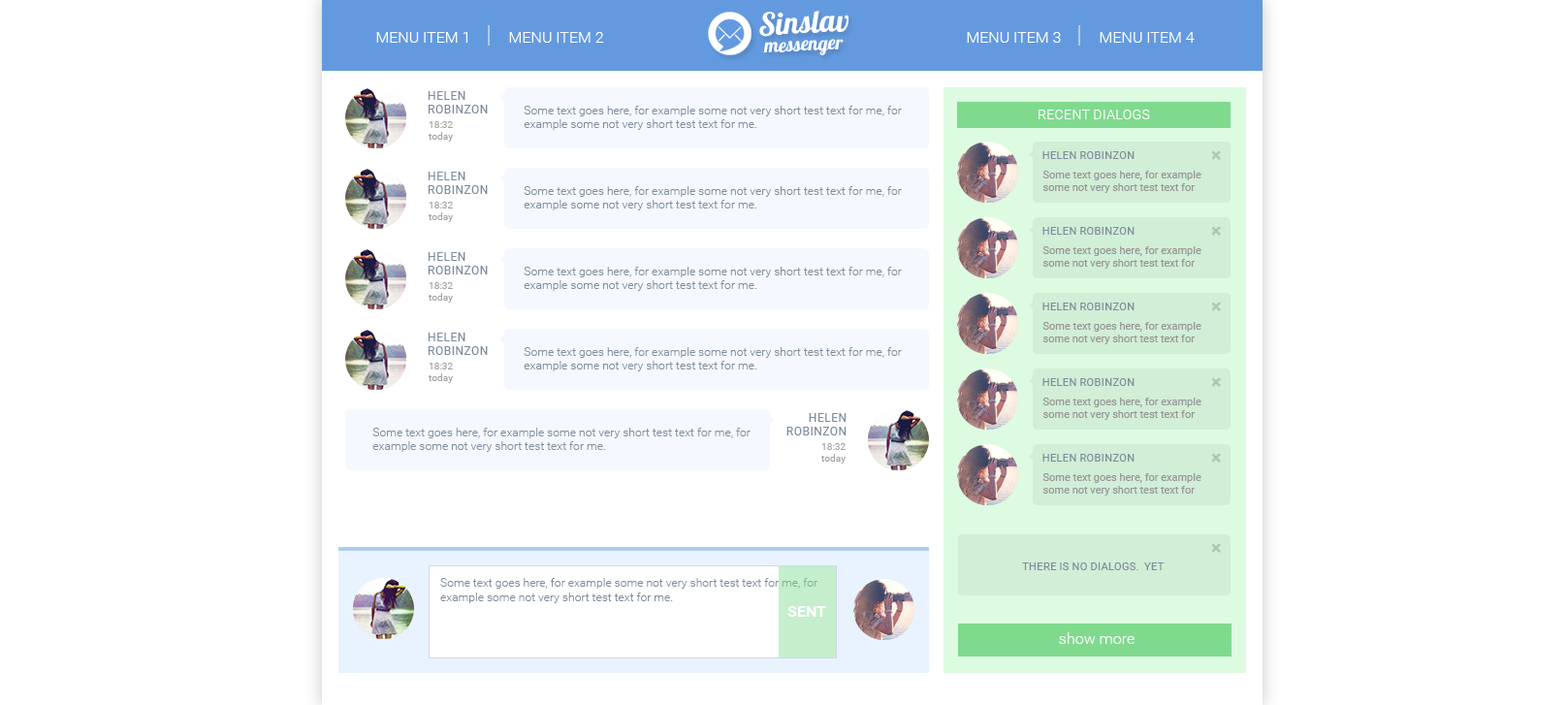
<style>
.page{position:relative;width:1568px;height:705px;background:#ffffff}
.page>*{position:absolute;margin:0}
.t1{font:15.5px "Roboto-Light";color:#ffffff}
.t2{font:24.2px "Roboto-Thin";color:#ffffff}
.t3{font:11.6px "Roboto-Regular";color:#7e8c9d;text-transform:uppercase}
.t4{font:11.7px "Roboto-Light";color:#7e8c9d}
.t5{font:13.6px "Roboto-Light";color:#ffffff;text-transform:uppercase}
.t6{font:9.7px "Roboto-Regular";color:#a2a2a2;text-transform:uppercase}
.t7{font:9.7px "Roboto-Regular";color:#a2a2a2}
.t8{font:10.7px "Roboto-Regular";color:#7e8c9d;text-transform:uppercase}
.t9{font:10.7px "Roboto-Regular";color:#979595}
.t10{font:15.5px "Roboto-Bold";color:#ffffff}
</style>
<div class="page">
<p class="t1" style="left:376px;top:25px;width:228px;height:21px">MENU ITEM 1   <span class="t2">|   </span>MENU ITEM 2</p>
<p class="t1" style="left:967px;top:25px;width:228px;height:21px">MENU ITEM 3   <span class="t2">|   </span>MENU ITEM 4</p>
<p class="t3" style="left:428px;top:91px;width:60px;height:22px">Helen <br>robinzon</p>
<p class="t4" style="left:524px;top:106px;width:378px;height:24px">Some text goes here, for example some not very short test text for me, for <br>example some not very short test text for me.</p>
<p class="t5" style="left:1039px;top:110px;width:111px;height:9px">recent dialogs</p>
<p class="t6" style="left:428px;top:121px;width:25px;height:21px">18:32<br><span class="t7">today</span></p>
<p class="t8" style="left:1042px;top:151px;width:93px;height:8px">Helen robinzon</p>
<p class="t3" style="left:428px;top:172px;width:60px;height:22px">Helen <br>robinzon</p>
<p class="t9" style="left:1042px;top:171px;width:159px;height:22px">Some text goes here, for example some not very short test text for me.</p>
<p class="t4" style="left:524px;top:186px;width:378px;height:24px">Some text goes here, for example some not very short test text for me, for <br>example some not very short test text for me.</p>
<p class="t6" style="left:428px;top:202px;width:25px;height:20px">18:32<br><span class="t7">today</span></p>
<p class="t8" style="left:1042px;top:227px;width:93px;height:8px">Helen robinzon</p>
<p class="t3" style="left:428px;top:252px;width:60px;height:22px">Helen <br>robinzon</p>
<p class="t9" style="left:1042px;top:246px;width:159px;height:23px">Some text goes here, for example some not very short test text for me.</p>
<p class="t4" style="left:524px;top:267px;width:378px;height:24px">Some text goes here, for example some not very short test text for me, for <br>example some not very short test text for me.</p>
<p class="t6" style="left:428px;top:282px;width:25px;height:21px">18:32<br><span class="t7">today</span></p>
<p class="t8" style="left:1042px;top:303px;width:93px;height:7px">Helen robinzon</p>
<p class="t9" style="left:1042px;top:322px;width:159px;height:22px">Some text goes here, for example some not very short test text for me.</p>
<p class="t3" style="left:428px;top:333px;width:60px;height:22px">Helen <br>robinzon</p>
<p class="t4" style="left:524px;top:347px;width:378px;height:24px">Some text goes here, for example some not very short test text for me, for <br>example some not very short test text for me.</p>
<p class="t6" style="left:428px;top:363px;width:25px;height:20px">18:32<br><span class="t7">today</span></p>
<p class="t8" style="left:1042px;top:378px;width:93px;height:8px">Helen robinzon</p>
<p class="t9" style="left:1042px;top:398px;width:159px;height:22px">Some text goes here, for example some not very short test text for me.</p>
<p class="t3" style="left:786px;top:413px;width:61px;height:22px;text-align:right">Helen<br>robinzon</p>
<p class="t4" style="left:372px;top:428px;width:379px;height:24px">Some text goes here, for example some not very short test text for me, for <br>example some not very short test text for me.</p>
<p class="t6" style="left:820px;top:443px;width:26px;height:21px">18:32<br><span class="t7">today</span></p>
<p class="t8" style="left:1042px;top:454px;width:93px;height:8px">Helen robinzon</p>
<p class="t9" style="left:1042px;top:473px;width:159px;height:23px">Some text goes here, for example some not very short test text for me.</p>
<p class="t8" style="left:1022px;top:562px;width:143px;height:8px">There is no dialogs.  YEt</p>
<p class="t4" style="left:440px;top:578px;width:377px;height:25px">Some text goes here, for example some not very short test text for me, for <br>example some not very short test text for me.</p>
<p class="t10" style="left:787px;top:606px;width:39px;height:11px">SENT</p>
<p class="t1" style="left:1059px;top:632px;width:76px;height:12px">show more</p>
</div>
